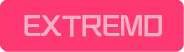
<style>
.page{position:relative;width:184px;height:52px;background:#fe3870}
.page>*{position:absolute;margin:0}
.t1{font:24px "KafuTechnoStd-HV";color:#ffa7c1;scale:0.92 1}
</style>
<div class="page">
<p class="t1" style="left:24px;top:15px;width:138px;height:22px">EXTREMO</p>
</div>
